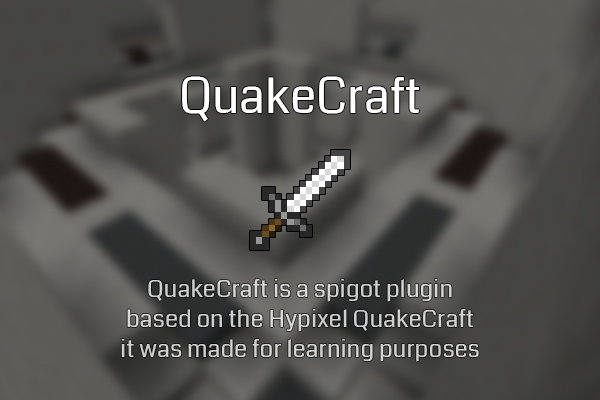
<style>
.page{position:relative;width:600px;height:400px}
.page>*{position:absolute;margin:0}
.t1{font:48px "Coda-Regular";color:#ffffff}
.t2{font:24px/30px "Coda-Regular";color:#d3d3d2}
</style>
<div class="page">
<p class="t1" style="left:182px;top:76px;width:237px;height:46px">QuakeCraft</p>
<p class="t2" style="left:121px;top:279px;width:358px;height:83px;text-align:center">QuakeCraft is a spigot plugin<br>based on the Hypixel QuakeCraft<br>it was made for learning purposes</p>
</div>
